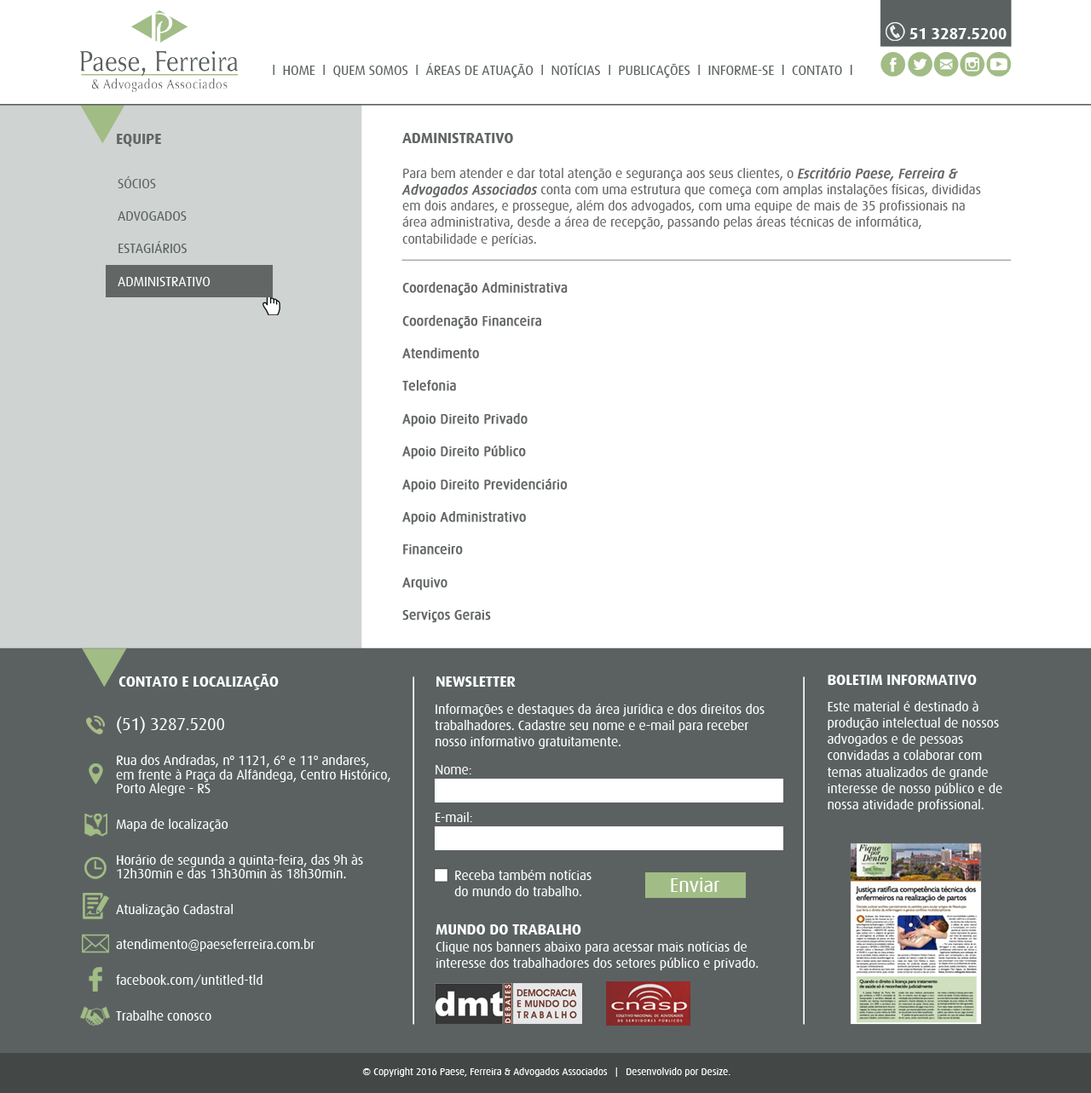
<style>
.page{position:relative;width:1091px;height:1093px;background:#ffffff}
.page>*{position:absolute;margin:0}
.t1{font:16px "Dax-Bold";letter-spacing:-0.01em;color:#ffffff}
.t2{font:13.6px "Dax-Regular";letter-spacing:-0.01em;color:#5b6161}
.t3{font:12.6px "ArialMT";letter-spacing:-0.01em;color:#000000}
.t4{font:15.3px "Dax-Bold";letter-spacing:-0.01em;color:#626665}
.t5{font:13.6px "Dax-Regular";letter-spacing:-0.01em;color:#626665}
.t6{font:13.6px "Dax-Italic";letter-spacing:-0.01em;color:#626665;font-weight:bold}
.t7{font:13.6px "Dax-Regular";letter-spacing:-0.01em;color:#626665;font-weight:bold}
.t8{font:15.3px "Dax-Bold";letter-spacing:-0.01em;color:#ffffff}
.t9{font:13.6px "Dax-Regular";letter-spacing:-0.01em;color:#ffffff}
.t10{font:13.6px/14.1px "Dax-Regular";letter-spacing:-0.01em;color:#ffffff}
.t11{font:17px/14.1px "Dax-Regular";letter-spacing:-0.01em;color:#ffffff}
.t12{font:20.2px "Dax-Regular";letter-spacing:-0.01em;color:#ffffff}
.t13{font:10.2px "Dax-Regular";letter-spacing:-0.01em;color:#ffffff}
</style>
<div class="page">
<p class="t1" style="left:909px;top:28px;width:97px;height:11px">51 3287.5200</p>
<p class="t2" style="left:273px;top:63px;width:579px;height:15px"><span class="t3"><br></span>l  HOME  l  QUEM SOMOS  l  ÁREAS DE ATUAÇÃO  l  NOTÍCIAS  l  PUBLICAÇÕES  l  INFORME-SE  l  CONTATO  l</p>
<p class="t4" style="left:117px;top:134px;width:44px;height:13px">EQUIPE</p>
<p class="t5" style="left:401px;top:133px;width:580px;height:490px"><span class="t4">ADMINISTRATIVO<br><br></span>Para bem atender e dar total atenção e segurança aos seus clientes, o <span class="t6">Escritório Paese, Ferreira &amp; Advogados Associados</span> conta com uma estrutura que começa com amplas instalações físicas, divididas em dois andares, e prossegue, além dos advogados, com uma equipe de mais de 35 profissionais na área administrativa, desde a área de recepção, passando pelas áreas técnicas de informática, contabilidade e perícias.<br><br><br><span class="t7">Coordenação Administrativa<br><br>Coordenação Financeira<br><br>Atendimento<br><br>Telefonia<br><br>Apoio Direito Privado<br><br>Apoio Direito Público<br><br>Apoio Direito Previdenciário<br><br>Apoio Administrativo<br><br>Financeiro<br><br>Arquivo<br><br>Serviços Gerais</span></p>
<p class="t8" style="left:118px;top:674px;width:161px;height:16px">CONTATO E LOCALIZAÇÃO</p>
<p class="t8" style="left:436px;top:677px;width:80px;height:10px">NEWSLETTER</p>
<p class="t9" style="left:827px;top:675px;width:175px;height:137px"><span class="t8">BOLETIM INFORMATIVO<br><br></span>Este material é destinado à produção intelectual de nossos advogados e de pessoas convidadas a colaborar com temas atualizados de grande interesse de nosso público e de nossa atividade profissional.</p>
<p class="t9" style="left:435px;top:704px;width:329px;height:45px">Informações e destaques da área jurídica e dos direitos dos trabalhadores. Cadastre seu nome e e-mail para receber nosso informativo gratuitamente.</p>
<p class="t10" style="left:116px;top:717px;width:274px;height:304px"><span class="t11">(51) 3287.5200<br><br></span>Rua dos Andradas, nº 1121, 6º e 11º andares, <br>em frente à Praça da Alfândega, Centro Histórico, Porto Alegre - RS<br><br>Mapa de localização<br><br>Horário de segunda a quinta-feira, das 9h às 12h30min e das 13h30min às 18h30min.<br><br>Atualização Cadastral<br><br>atendimento@paeseferreira.com.br<br><br>facebook.com/untitled-tld<br><br>Trabalhe conosco</p>
<p class="t9" style="left:435px;top:765px;width:36px;height:10px">Nome:</p>
<p class="t9" style="left:435px;top:812px;width:37px;height:10px">E-mail:</p>
<p class="t9" style="left:454px;top:870px;width:137px;height:26px">Receba também notícias<br>do mundo do trabalho.</p>
<p class="t12" style="left:671px;top:878px;width:49px;height:14px">Enviar</p>
<p class="t9" style="left:435px;top:925px;width:323px;height:46px"><span class="t8">MUNDO DO TRABALHO <br></span>Clique nos banners abaixo para acessar mais notícias de <br>interesse dos trabalhadores dos setores público e privado.</p>
<p class="t13" style="left:362px;top:1068px;width:368px;height:9px">© Copyright 2016 Paese, Ferreira &amp; Advogados Associados   |   Desenvolvido por Desize.</p>
</div>
